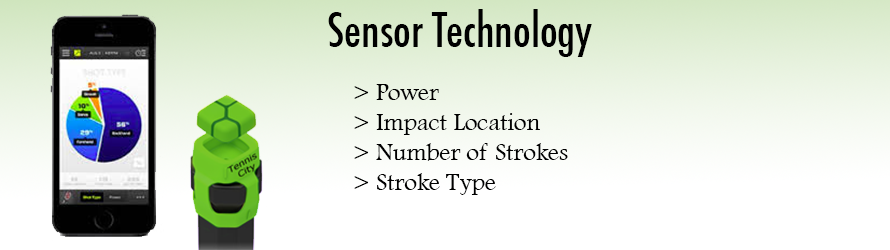
<style>
.page{position:relative;width:890px;height:250px;background:#ffffff}
.page>*{position:absolute;margin:0}
.t1{font:45.8px "Futura-CondensedMedium";color:#000000}
.t2{font:25px "FootlightMTLight";color:#000000}
.t3{font:33.3px "FootlightMTLight";color:#000000}
</style>
<div class="page">
<p class="t1" style="left:328px;top:9px;width:264px;height:48px">Sensor Technology</p>
<p class="t2" style="left:354px;top:84px;width:214px;height:111px"><span class="t3"><br></span>&gt; Power<br>&gt; Impact Location<br>&gt; Number of Strokes<br>&gt; Stroke Type</p>
</div>
